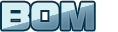
<style>
.page{position:relative;width:118px;height:32px;background:#ffffff}
.page>*{position:absolute;margin:0}
.t1{font:41.3px "DFSoGeiStd-W9";letter-spacing:-0.03em;font-weight:bold;scale:0.96 1}
</style>
<div class="page">
<p class="t1" style="left:2px;top:2px;width:92px;height:28px">BOM</p>
</div>
